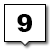
<style>
.page{position:relative;width:50px;height:50px;background:#ffffff}
.page>*{position:absolute;margin:0}
.t1{font:25.4px "Arial-Black";color:#000000}
</style>
<div class="page">
<p class="t1" style="left:17px;top:14px;width:15px;height:18px">9</p>
</div>
